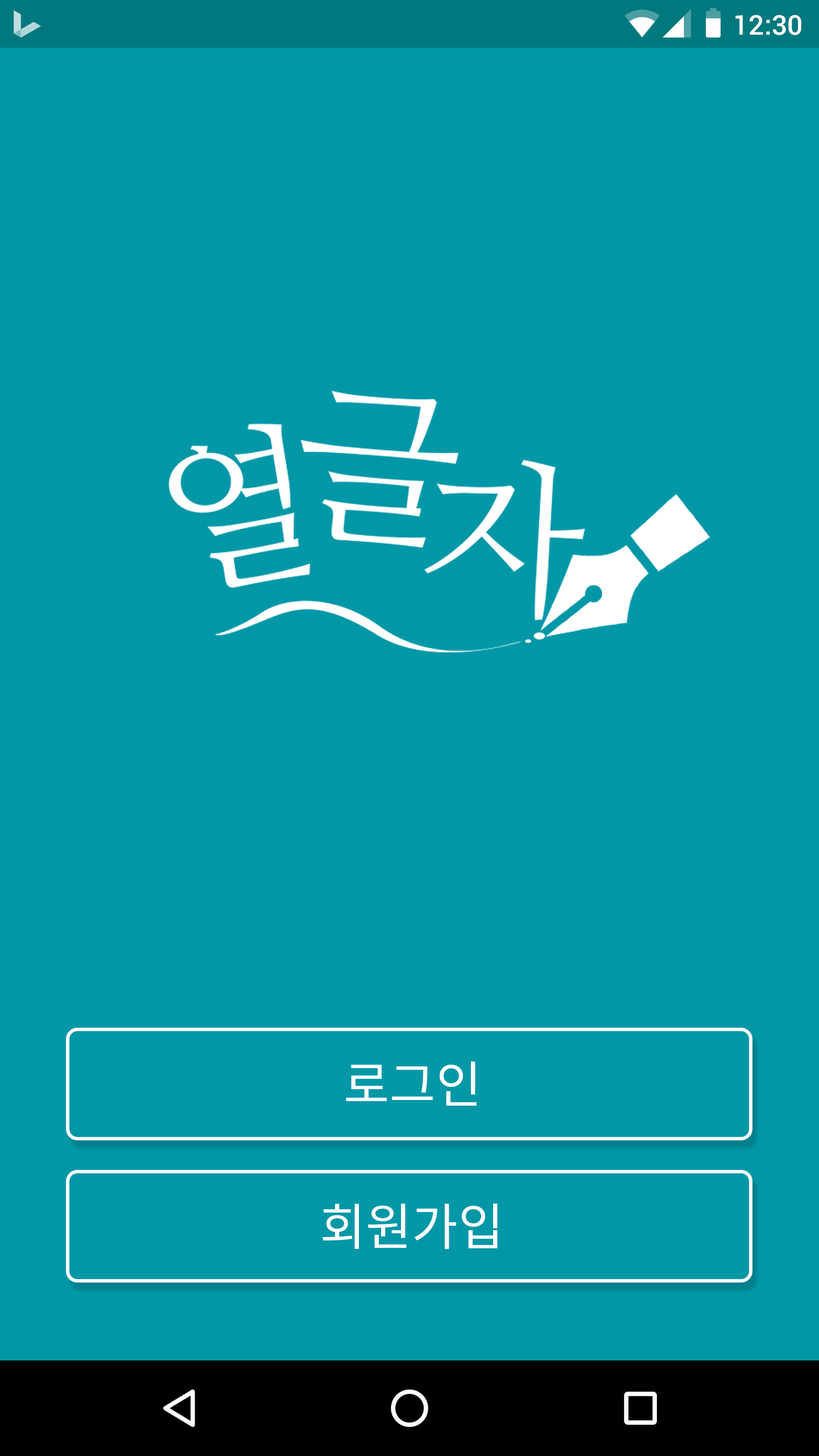
<style>
.page{position:relative;width:819px;height:1456px;background:#0097a7}
.page>*{position:absolute;margin:0}
.t1{font:27.3px "Roboto-Medium";color:#ffffff}
.t2{font:50px "NotoSansCJKkr-Regular";color:#ffffff}
</style>
<div class="page">
<p class="t1" style="left:735px;top:15px;width:66px;height:20px">12:30</p>
<p class="t2" style="left:346px;top:1061px;width:131px;height:45px">로그인</p>
<p class="t2" style="left:322px;top:1203px;width:176px;height:46px">회원가입</p>
</div>
